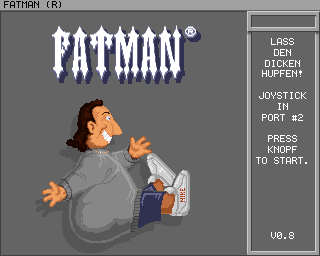
<style>
.page{position:relative;width:320px;height:256px;background:#646464}
.page>*{position:absolute;margin:0}
.t1{font:8px "Terminal";color:#000000}
.t2{font:9px "Terminal";color:#ffffff}
</style>
<div class="page">
<p class="t1" style="left:4px;top:1px;width:57px;height:7px">FATMAN (R)</p>
<p class="t2" style="left:256px;top:38px;width:51px;height:201px;text-align:center">LASS<br>DEN<br>DICKEN<br>HUPFEN!<br><br>JOYSTICK<br>IN<br>PORT #2<br><br>PRESS<br>KNOPF<br>TO START.<br><br><br><br><br><br><br>V0.8</p>
</div>
